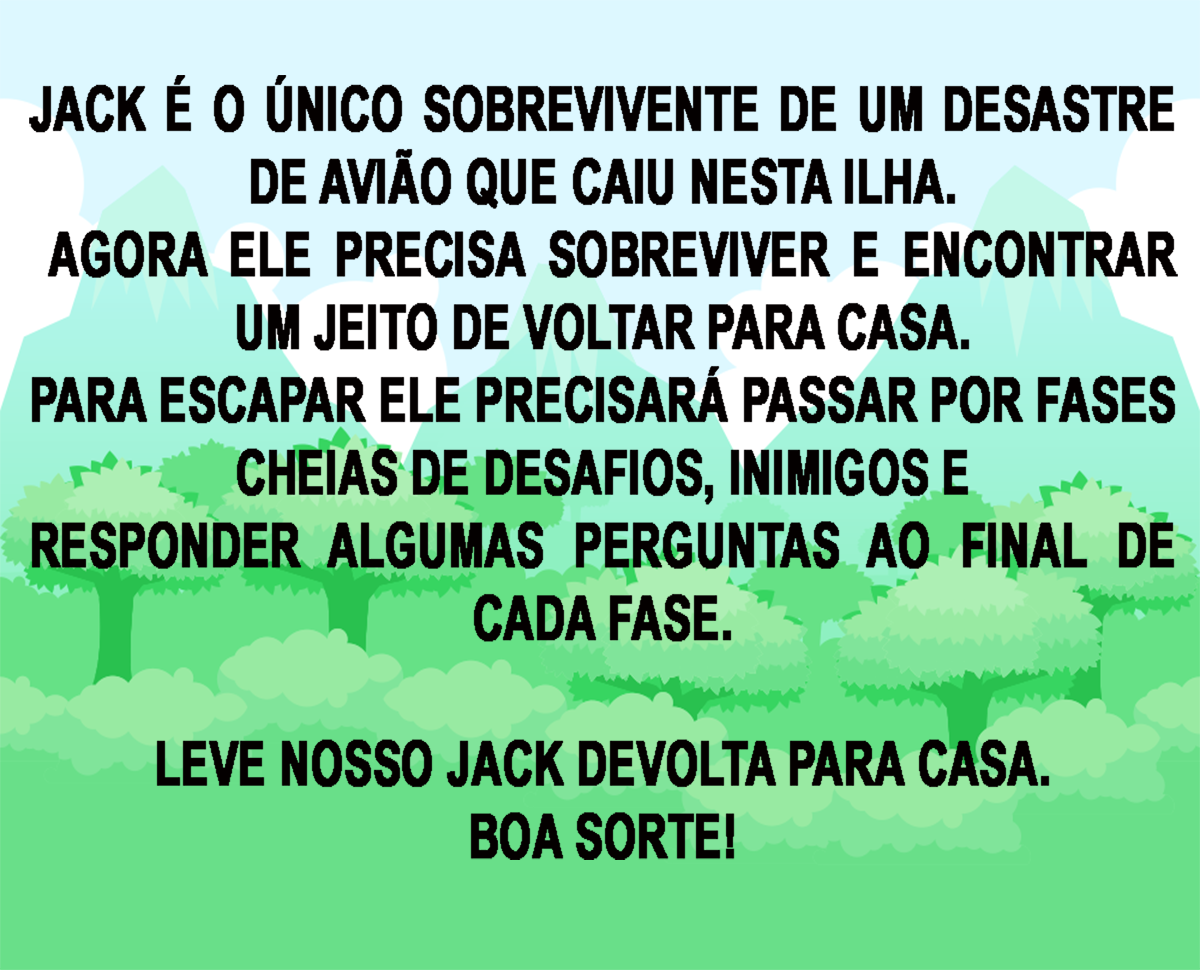
<style>
.page{position:relative;width:1200px;height:970px}
.page>*{position:absolute;margin:0}
.t1{font:14.5px "ArialNarrow-Bold";color:#040000;font-weight:bold;scale:0.82 1}
.t2{font:14.5px "ArialNarrow-Bold";color:#fe2131;font-weight:bold;scale:0.82 1}
</style>
<div class="page">
<p class="t1" style="left:29px;top:75px;width:1149px;height:785px;text-align:center"><span class="t2"><br></span>JACK É O ÚNICO SOBREVIVENTE DE UM DESASTRE DE AVIÃO QUE CAIU NESTA ILHA.<br> AGORA ELE PRECISA SOBREVIVER E ENCONTRAR UM JEITO DE VOLTAR PARA CASA.<br>PARA ESCAPAR ELE PRECISARÁ PASSAR POR FASES CHEIAS DE DESAFIOS, INIMIGOS E <br>RESPONDER ALGUMAS PERGUNTAS AO FINAL DE CADA FASE.<br><br>LEVE NOSSO JACK DEVOLTA PARA CASA.<br>BOA SORTE!</p>
</div>
